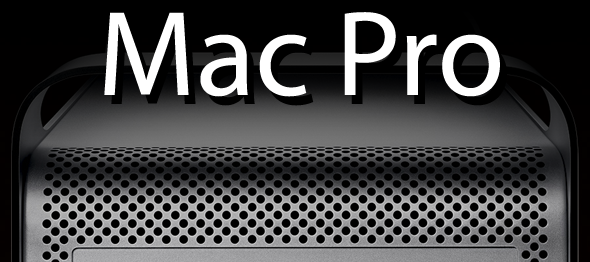
<style>
.page{position:relative;width:590px;height:262px;background:#000000}
.page>*{position:absolute;margin:0}
.t1{font:122px "Myriad-Roman";color:#ffffff}
</style>
<div class="page">
<p class="t1" style="left:104px;top:12px;width:396px;height:85px">Mac Pro</p>
</div>
